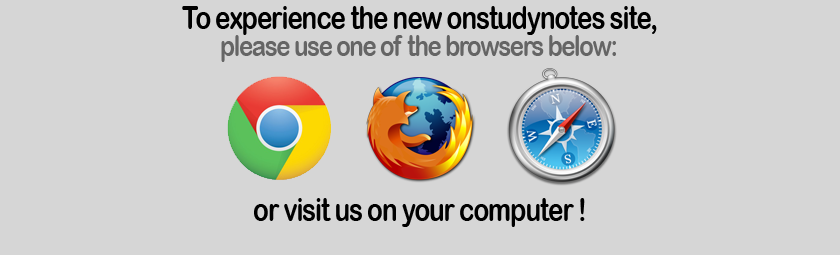
<style>
.page{position:relative;width:840px;height:255px;background:#d6d6d6}
.page>*{position:absolute;margin:0}
.t1{font:32.2px "ArialRoundedMTBold";letter-spacing:-0.05em;color:#000000;scale:0.82 1}
.t2{font:28.8px "ArialRoundedMTBold";letter-spacing:-0.05em;color:#656565;scale:0.82 1}
</style>
<div class="page">
<p class="t1" style="left:182px;top:6px;width:475px;height:29px">To experience the new onstudynotes site,</p>
<p class="t2" style="left:221px;top:35px;width:395px;height:27px">please use one of the browsers below:</p>
<p class="t1" style="left:254px;top:198px;width:331px;height:29px">or visit us on your computer !</p>
</div>
